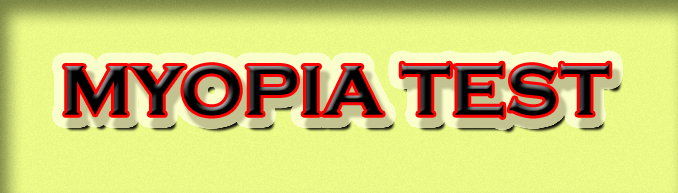
<style>
.page{position:relative;width:678px;height:193px}
.page>*{position:absolute;margin:0}
.t1{font:73.3px "CopperplateGothic-Bold";color:#000000}
</style>
<div class="page">
<p class="t1" style="left:65px;top:63px;width:545px;height:54px">MYOPIA TEST</p>
</div>
